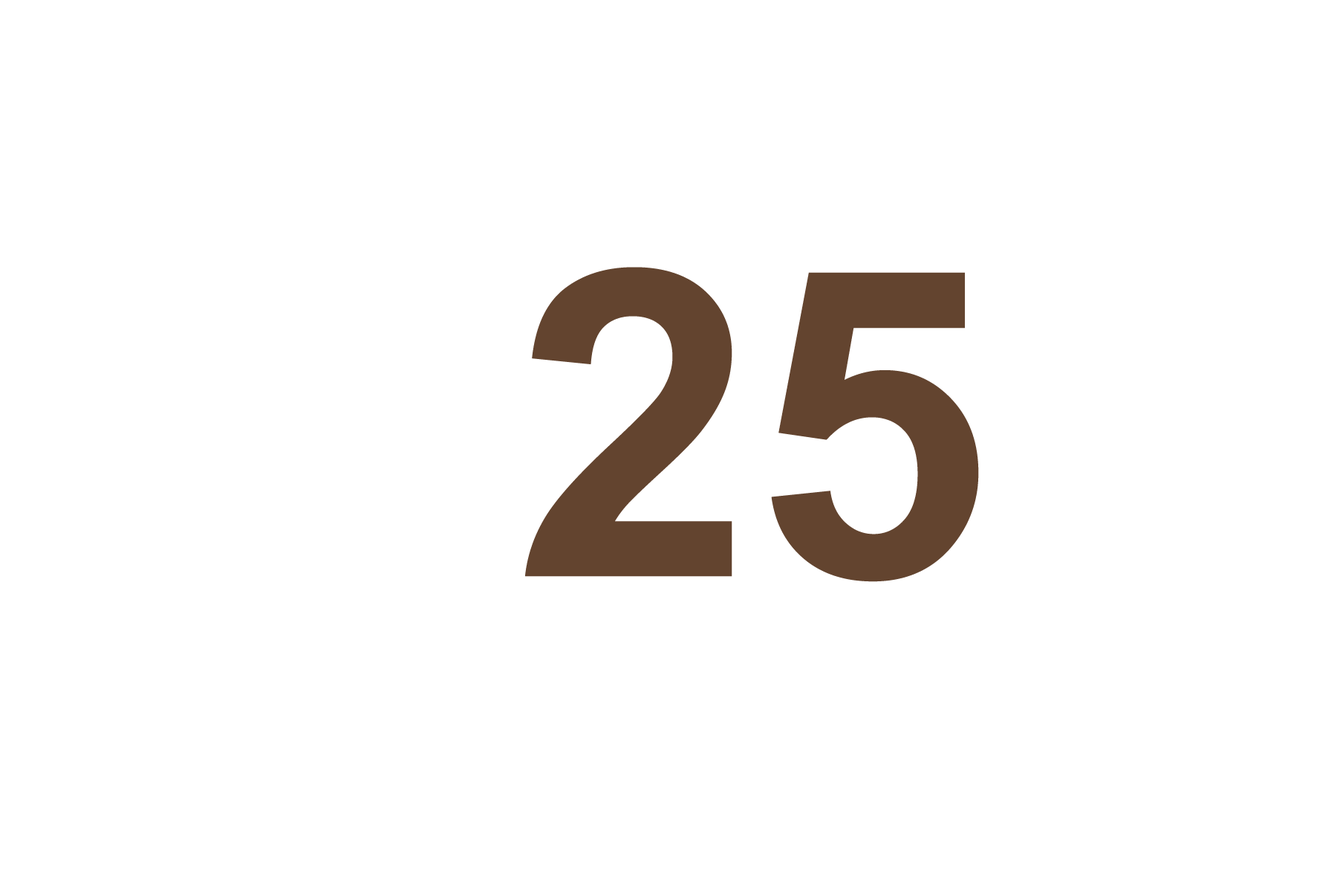
<style>
.page{position:relative;width:1337px;height:892px;background:#ffffff}
.page>*{position:absolute;margin:0}
.t1{font:429.6px "Arial-BoldMT";color:#63442f}
</style>
<div class="page">
<p class="t1" style="left:525px;top:267px;width:454px;height:315px">25</p>
</div>
